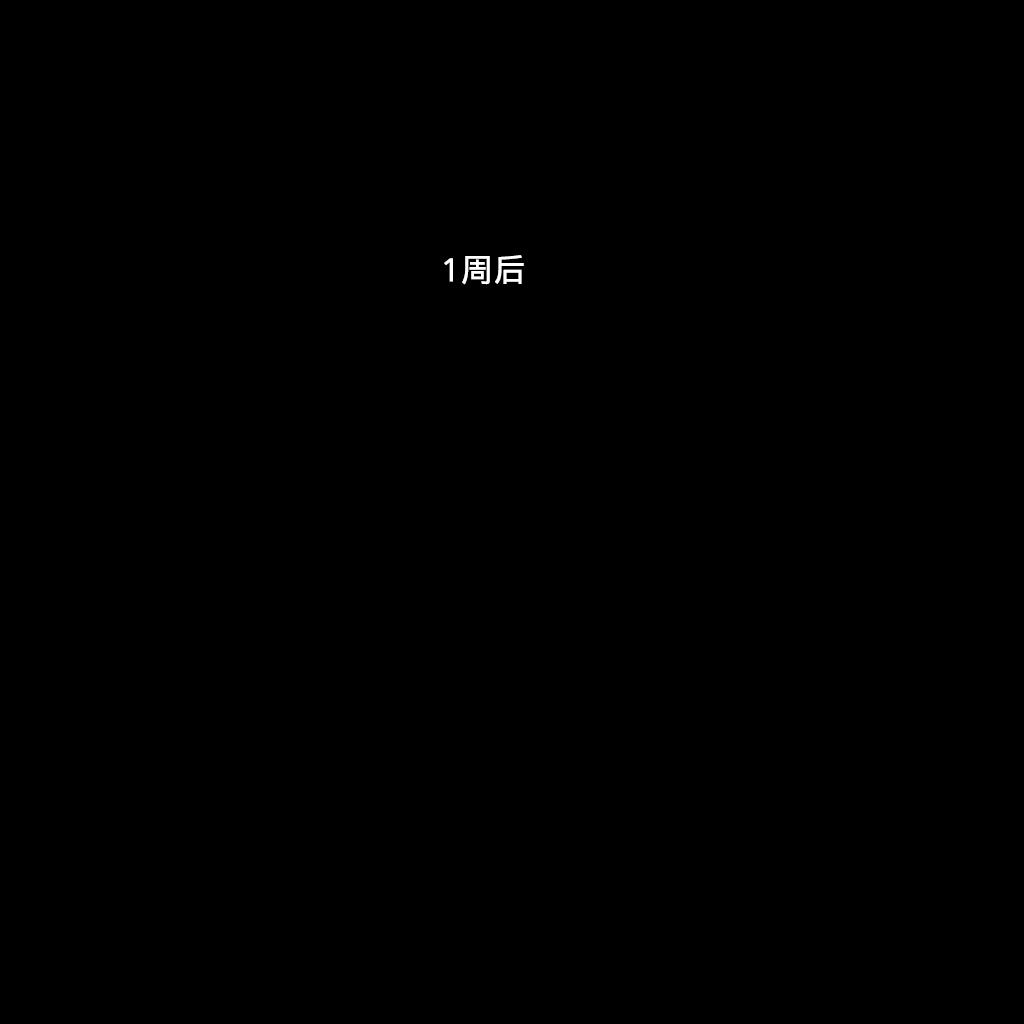
<style>
.page{position:relative;width:1024px;height:1024px;background:#000000}
.page>*{position:absolute;margin:0}
.t1{font:32px "WenQuanYiMicroHeiMono";color:#ffffff;font-weight:bold}
</style>
<div class="page">
<p class="t1" style="left:444px;top:255px;width:80px;height:30px">1周后</p>
</div>
